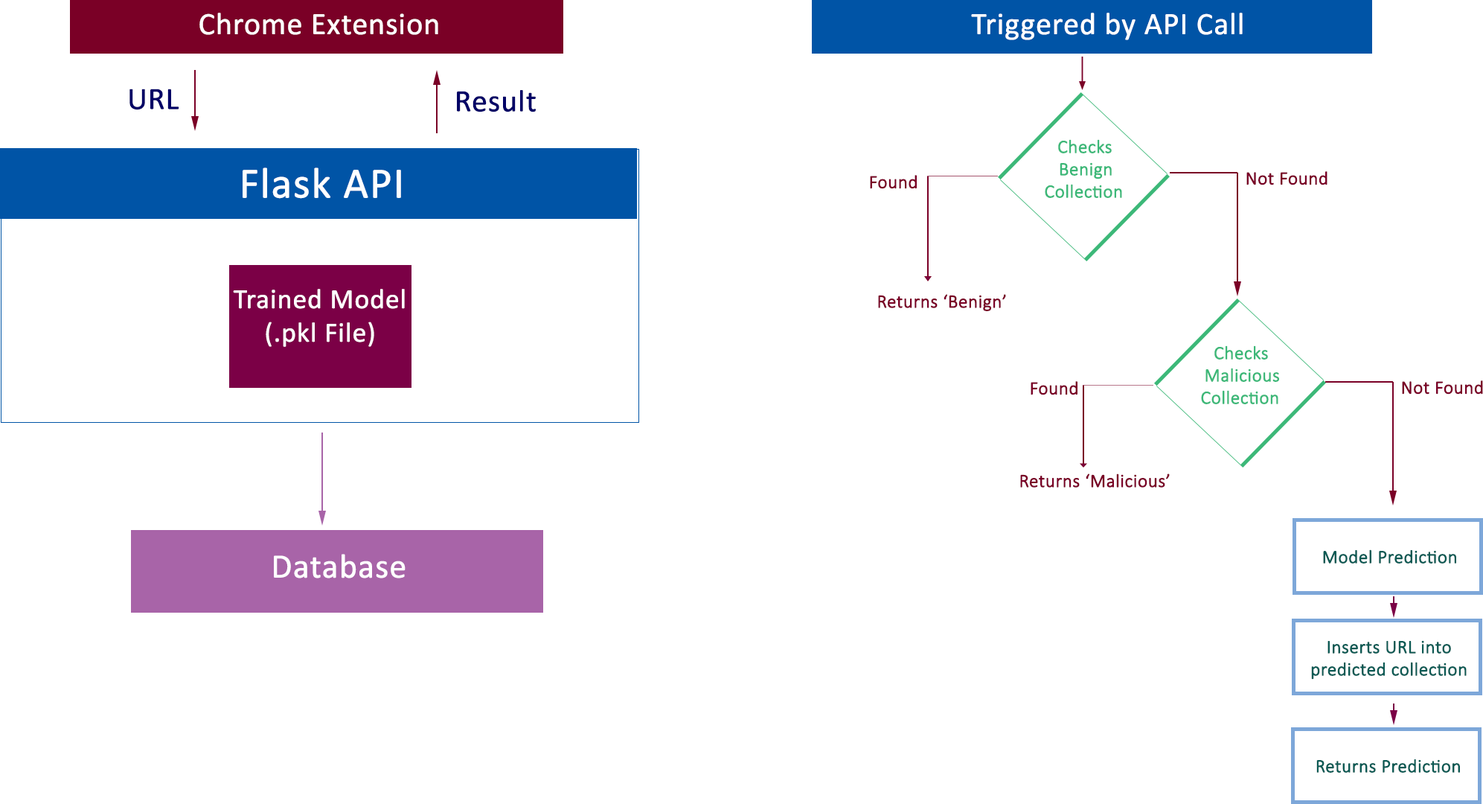
<style>
.page{position:relative;width:1483px;height:804px;background:#ffffff}
.page>*{position:absolute;margin:0}
.t1{font:31px "Calibri";color:#ffffff;font-weight:bold}
.t2{font:31px "Calibri";color:#000066;font-weight:bold}
.t3{font:18.6px "Calibri-Light";color:#3cb878;font-weight:bold}
.t4{font:43.4px "Calibri";color:#ffffff;font-weight:bold}
.t5{font:18.6px "Calibri-Light";color:#7a0026;font-weight:bold}
.t6{font:27.9px "Calibri";color:#ffffff;font-weight:bold}
.t7{font:34.1px "Calibri";color:#ffffff;font-weight:bold}
.t8{font:18.6px "Calibri-Light";color:#0b5a54;font-weight:bold}
</style>
<div class="page">
<p class="t1" style="left:199px;top:13px;width:239px;height:22px">Chrome Extension</p>
<p class="t1" style="left:971px;top:13px;width:272px;height:27px">Triggered by API Call</p>
<p class="t2" style="left:130px;top:89px;width:49px;height:21px">URL</p>
<p class="t2" style="left:457px;top:90px;width:79px;height:22px">Result</p>
<p class="t3" style="left:1045px;top:139px;width:77px;height:59px;text-align:center">Checks Benign<br>Collection</p>
<p class="t4" style="left:243px;top:167px;width:158px;height:32px">Flask API</p>
<p class="t5" style="left:1247px;top:171px;width:81px;height:14px">Not Found</p>
<p class="t5" style="left:870px;top:175px;width:47px;height:14px">Found</p>
<p class="t6" style="left:233px;top:289px;width:172px;height:58px;text-align:center">Trained Model<br>(.pkl File)</p>
<p class="t5" style="left:878px;top:294px;width:128px;height:17px">Returns ‘Benign’</p>
<p class="t3" style="left:1201px;top:345px;width:78px;height:59px;text-align:center">Checks<br>Malicious<br>Collection</p>
<p class="t5" style="left:1031px;top:381px;width:47px;height:14px">Found</p>
<p class="t5" style="left:1402px;top:380px;width:81px;height:14px">Not Found</p>
<p class="t5" style="left:1020px;top:473px;width:150px;height:15px">Returns ‘Malicious’</p>
<p class="t7" style="left:274px;top:554px;width:132px;height:24px">Database</p>
<p class="t8" style="left:1323px;top:549px;width:134px;height:14px">Model Prediction</p>
<p class="t8" style="left:1311px;top:640px;width:156px;height:40px;text-align:center">Inserts URL into<br>predicted collection</p>
<p class="t8" style="left:1317px;top:758px;width:143px;height:15px">Returns Prediction</p>
</div>
